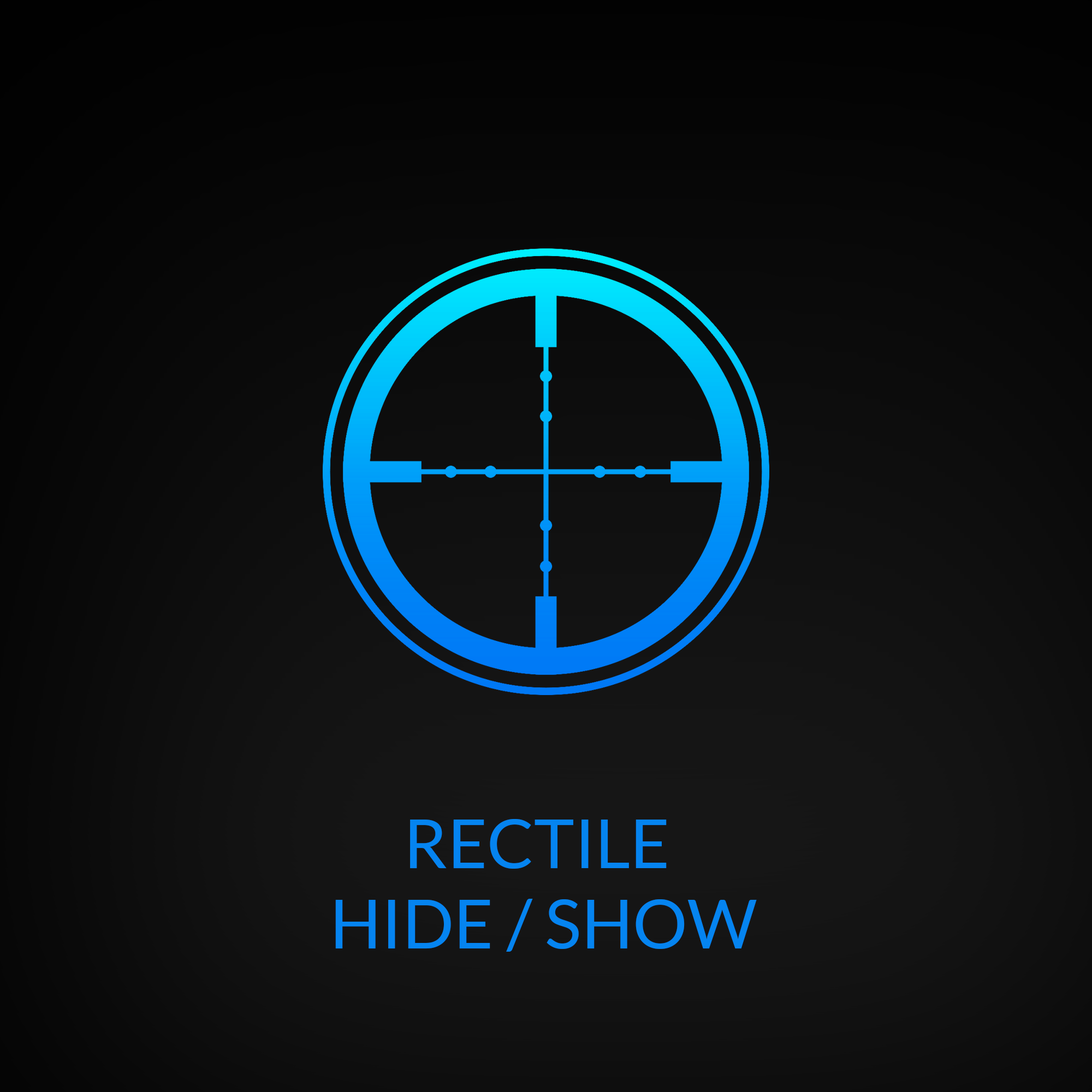
<style>
.page{position:relative;width:1092px;height:1092px}
.page>*{position:absolute;margin:0}
.t1{font:68.2px/80.2px "Lato-Regular";color:#0584f0}
</style>
<div class="page">
<p class="t1" style="left:335px;top:819px;width:422px;height:133px;text-align:center">RECTILE <br>HIDE / SHOW</p>
</div>
